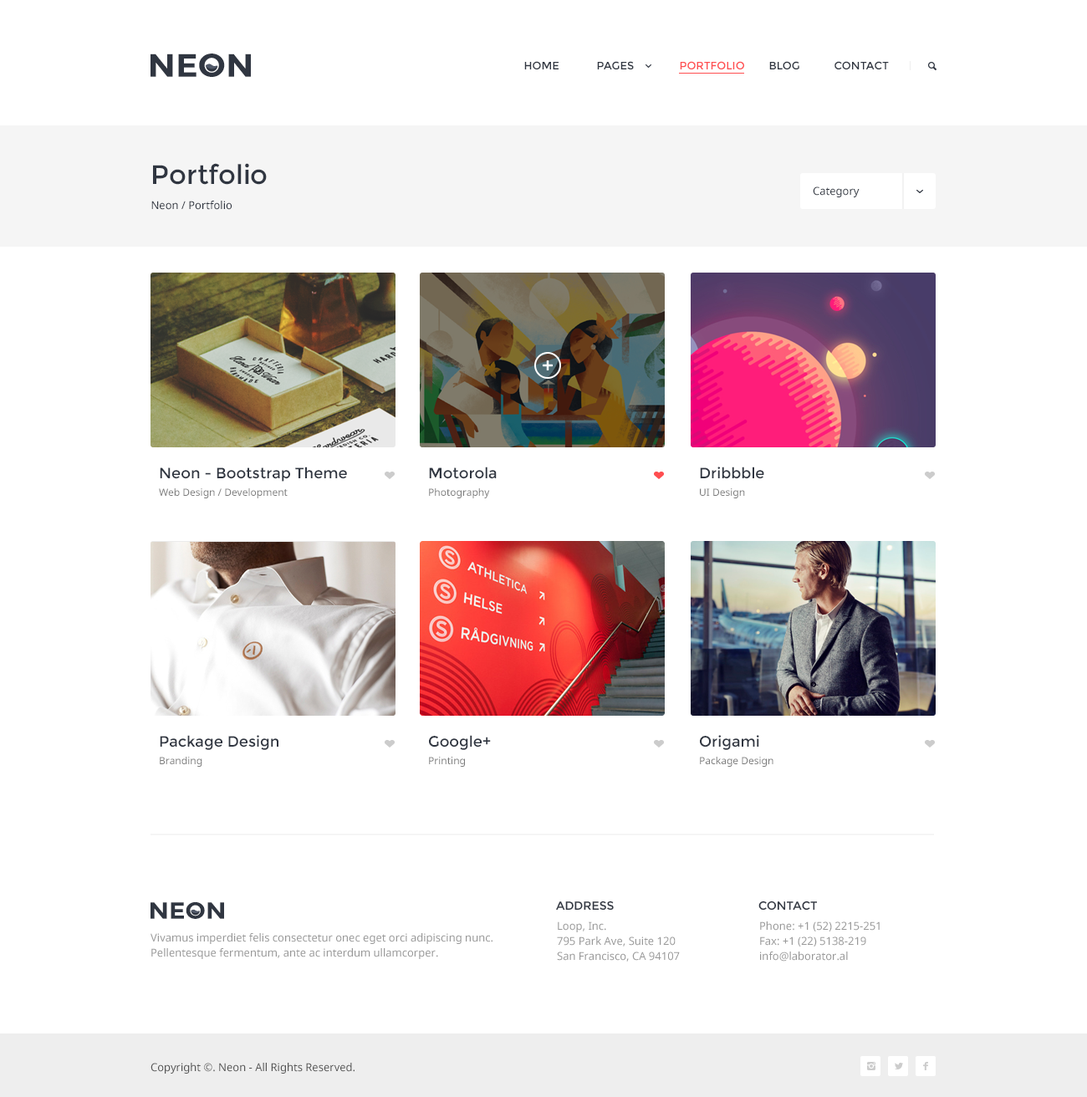
<style>
.page{position:relative;width:1087px;height:1097px;background:#ffffff}
.page>*{position:absolute;margin:0}
.t1{font:32.4px "Montserrat-Bold";color:#303641;scale:1.06 1}
.t2{font:10.9px "Montserrat-Regular";color:#303641;text-transform:uppercase}
.t3{font:10.9px "Montserrat-Regular";color:#ff4e50;text-transform:uppercase}
.t4{font:26.8px "Montserrat-Regular";color:#303641}
.t5{font:10.9px "NotoSans";color:#303641}
.t6{font:15.1px "Montserrat-Regular";color:#303641}
.t7{font:10px "NotoSans";color:#7a7a7a}
.t8{font:23.2px "Montserrat-Bold";color:#303641;scale:1.08 1}
.t9{font:11.7px "Montserrat-Regular";color:#303641;text-transform:uppercase}
.t10{font:10.9px/15.1px "NotoSans";color:#999999}
.t11{font:10.9px "NotoSans";color:#555555}
</style>
<div class="page">
<p class="t1" style="left:151px;top:54px;width:100px;height:23px">NEON</p>
<p class="t2" style="left:524px;top:61px;width:35px;height:8px">Home</p>
<p class="t2" style="left:597px;top:61px;width:37px;height:8px">Pages</p>
<p class="t3" style="left:680px;top:61px;width:64px;height:8px">Portfolio</p>
<p class="t2" style="left:769px;top:61px;width:30px;height:8px">Blog</p>
<p class="t2" style="left:834px;top:61px;width:55px;height:8px">Contact</p>
<p class="t4" style="left:153px;top:163px;width:114px;height:22px">Portfolio</p>
<p class="t5" style="left:813px;top:186px;width:47px;height:11px">Category</p>
<p class="t5" style="left:151px;top:201px;width:81px;height:9px">Neon / Portfolio</p>
<p class="t6" style="left:160px;top:467px;width:187px;height:15px">Neon - Bootstrap Theme</p>
<p class="t6" style="left:429px;top:467px;width:68px;height:12px">Motorola</p>
<p class="t6" style="left:700px;top:467px;width:64px;height:12px">Dribbble</p>
<p class="t7" style="left:159px;top:488px;width:129px;height:10px">Web Design / Development</p>
<p class="t7" style="left:429px;top:488px;width:61px;height:10px">Photography</p>
<p class="t7" style="left:700px;top:488px;width:45px;height:10px">UI Design</p>
<p class="t6" style="left:160px;top:735px;width:118px;height:15px">Package Design</p>
<p class="t6" style="left:429px;top:735px;width:62px;height:15px">Google+</p>
<p class="t6" style="left:700px;top:735px;width:59px;height:15px">Origami</p>
<p class="t7" style="left:160px;top:757px;width:42px;height:10px">Branding</p>
<p class="t7" style="left:429px;top:757px;width:36px;height:10px">Printing</p>
<p class="t7" style="left:700px;top:757px;width:73px;height:10px">Package Design</p>
<p class="t8" style="left:151px;top:902px;width:73px;height:17px">NEON</p>
<p class="t9" style="left:556px;top:901px;width:58px;height:10px">address</p>
<p class="t9" style="left:758px;top:901px;width:59px;height:10px">contact</p>
<p class="t10" style="left:557px;top:921px;width:123px;height:41px">Loop, Inc. <br>795 Park Ave, Suite 120 <br>San Francisco, CA 94107</p>
<p class="t10" style="left:760px;top:921px;width:120px;height:41px">Phone: +1 (52) 2215-251<br>Fax: +1 (22) 5138-219<br>info@laborator.al</p>
<p class="t10" style="left:151px;top:933px;width:341px;height:26px">Vivamus imperdiet felis consectetur onec eget orci adipiscing nunc. <br>Pellentesque fermentum, ante ac interdum ullamcorper.</p>
<p class="t11" style="left:151px;top:1063px;width:204px;height:11px">Copyright ©. Neon - All Rights Reserved.</p>
</div>
